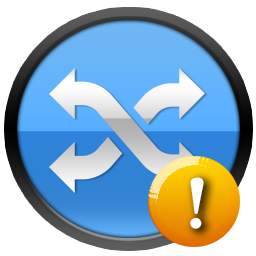
<style>
.page{position:relative;width:256px;height:256px;background:#ffffff}
.page>*{position:absolute;margin:0}
.t1{font:69.1px "HoeflerText-BlackItalic";color:#ffffff}
</style>
<div class="page">
<p class="t1" style="left:190px;top:177px;width:14px;height:52px;rotate:-11deg">!</p>
</div>
